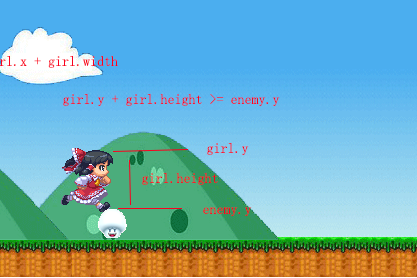
<style>
.page{position:relative;width:417px;height:278px;background:#4baeef}
.page>*{position:absolute;margin:0}
.t1{font:14px "SimSun";color:#fa011e}
</style>
<div class="page">
<p class="t1" style="left:63px;top:93px;width:217px;height:13px">girl.y + girl.height &gt;= enemy.y</p>
<p class="t1" style="left:207px;top:142px;width:42px;height:13px">girl.y</p>
<p class="t1" style="left:142px;top:172px;width:76px;height:13px">girl.height</p>
<p class="t1" style="left:203px;top:207px;width:49px;height:9px">enemy.y</p>
</div>
